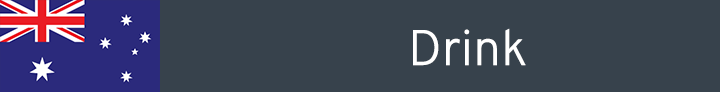
<style>
.page{position:relative;width:720px;height:92px;background:#37424c}
.page>*{position:absolute;margin:0}
.t1{font:50px "Overpass-Light";color:#ffffff}
</style>
<div class="page">
<p class="t1" style="left:413px;top:28px;width:113px;height:38px">Drink</p>
</div>
